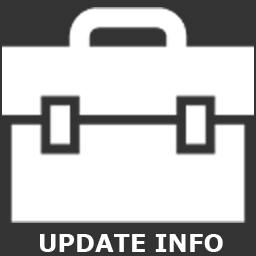
<style>
.page{position:relative;width:256px;height:256px;background:#ffffff}
.page>*{position:absolute;margin:0}
.t1{font:24px "Verdana-Bold";color:#ffffff}
</style>
<div class="page">
<p class="t1" style="left:40px;top:234px;width:183px;height:18px">UPDATE INFO</p>
</div>
